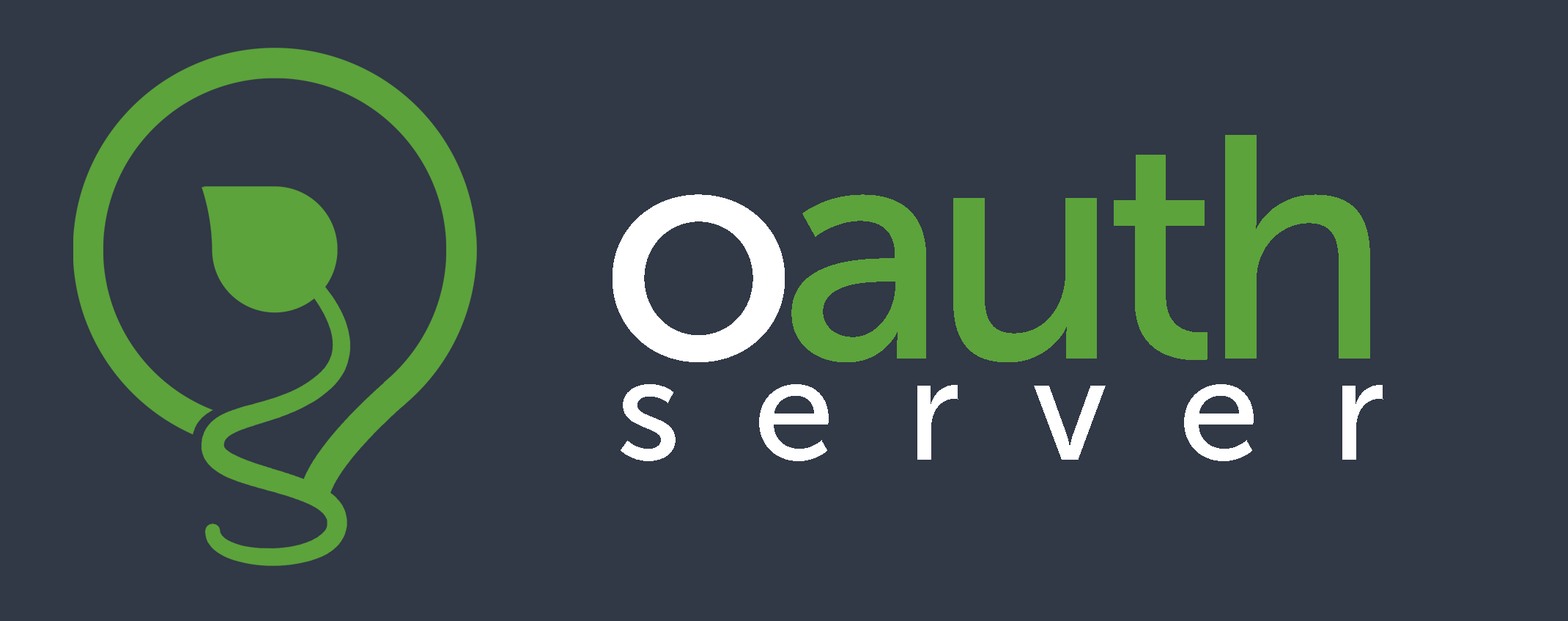
<style>
.page{position:relative;width:1568px;height:621px;background:#313846}
.page>*{position:absolute;margin:0}
.t1{font:315.1px "MuseoSans-500";letter-spacing:-0.05em;color:#5ca33b}
.t2{font:315.1px "MuseoSans-500";letter-spacing:-0.05em;color:#ffffff}
.t3{font:146.5px "MuseoSans-500";letter-spacing:0.49em;color:#ffffff}
</style>
<div class="page">
<p class="t1" style="left:613px;top:135px;width:757px;height:227px"><span class="t2">o</span>auth</p>
<p class="t3" style="left:621px;top:384px;width:762px;height:77px">server</p>
</div>
